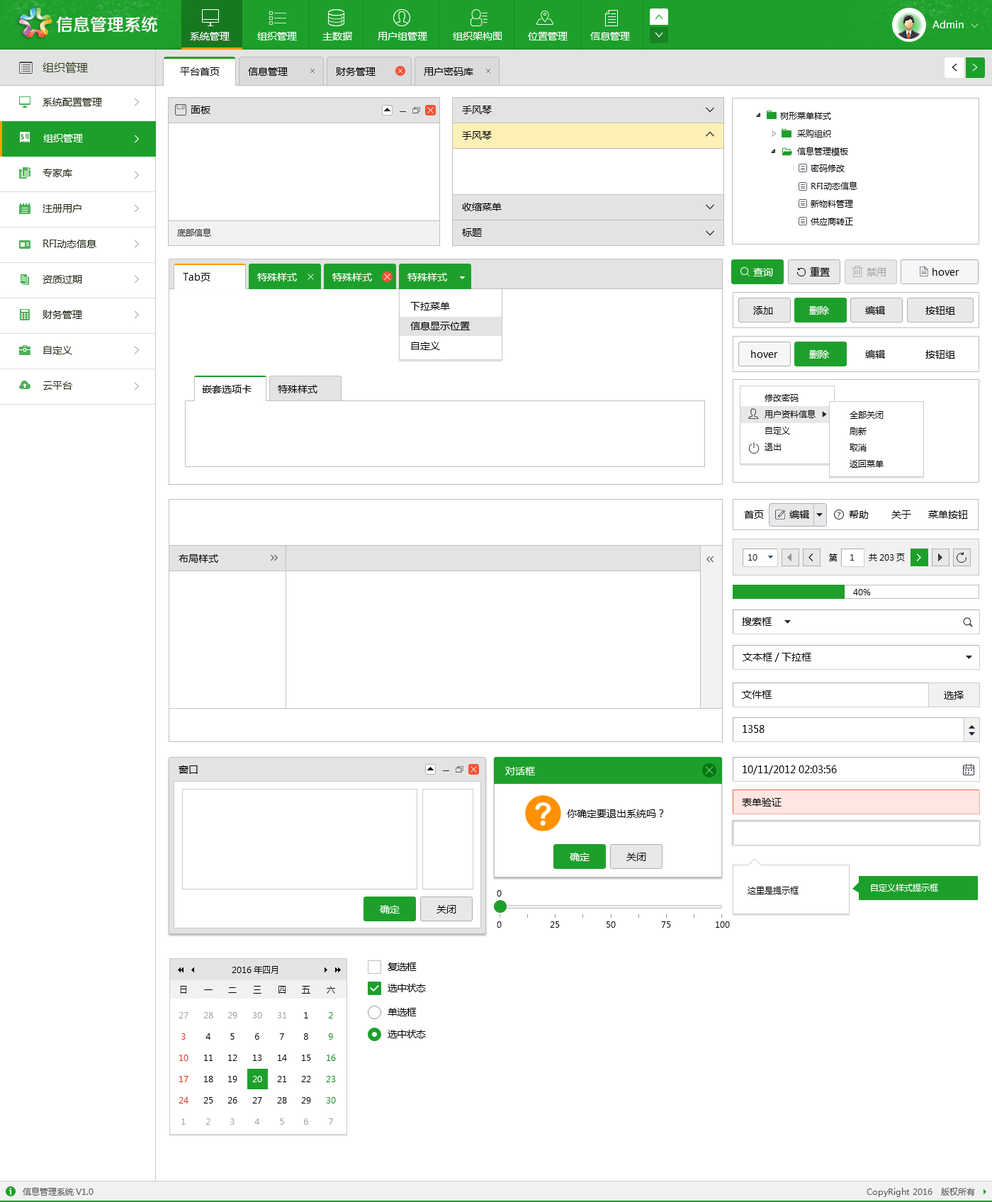
<style>
.page{position:relative;width:992px;height:1202px;background:#ffffff}
.page>*{position:absolute;margin:0}
.t1{font:9.9px "MicrosoftYaHei";color:#000000}
.t2{font:8.5px "MicrosoftYaHei";color:#000000}
.t3{font:8.5px/17.7px "MicrosoftYaHei";color:#000000}
.t4{font:8.5px "MicrosoftYaHei";color:#292929}
.t5{font:9.9px "MicrosoftYaHei";color:#ffffff}
.t6{font:9.9px "MicrosoftYaHei";color:#a3a3a3}
.t7{font:9.9px/19.8px "MicrosoftYaHei";color:#000000}
.t8{font:8.5px/16.3px "MicrosoftYaHei";color:#000000}
.t9{font:8.5px "MicrosoftYaHei";color:#171e24}
.t10{font:8.5px "MicrosoftYaHei";color:#ffffff}
.t11{font:9.9px "MicrosoftYaHei";letter-spacing:-0.05em;color:#000000}
.t12{font:8.5px/21.3px "MicrosoftYaHei";color:#de3618}
.t13{font:8.5px/21.3px "MicrosoftYaHei";color:#a6a6a6}
.t14{font:8.5px/21.3px "MicrosoftYaHei";color:#000000}
.t15{font:8.5px/21.3px "MicrosoftYaHei";color:#ffffff}
.t16{font:8.5px/21.3px "MicrosoftYaHei";color:#198f25}
</style>
<div class="page">
<p class="t1" style="left:191px;top:106px;width:19px;height:8px">面板</p>
<p class="t1" style="left:462px;top:106px;width:30px;height:8px">手风琴</p>
<p class="t2" style="left:780px;top:112px;width:51px;height:8px">树形菜单样式</p>
<p class="t1" style="left:462px;top:131px;width:30px;height:9px">手风琴</p>
<p class="t3" style="left:797px;top:130px;width:51px;height:26px">采购组织<br>信息管理模板</p>
<p class="t3" style="left:811px;top:164px;width:46px;height:61px">密码修改<br>RFI动态信息<br>新物料管理<br>供应商转正</p>
<p class="t1" style="left:462px;top:203px;width:40px;height:8px">收缩菜单</p>
<p class="t4" style="left:177px;top:228px;width:34px;height:9px">底部信息</p>
<p class="t1" style="left:462px;top:228px;width:20px;height:9px">标题</p>
<p class="t5" style="left:753px;top:268px;width:20px;height:8px">查询</p>
<p class="t1" style="left:810px;top:267px;width:20px;height:9px">重置</p>
<p class="t6" style="left:867px;top:268px;width:19px;height:8px">禁用</p>
<p class="t1" style="left:933px;top:268px;width:27px;height:8px">hover</p>
<p class="t1" style="left:183px;top:273px;width:27px;height:8px">Tab页</p>
<p class="t5" style="left:257px;top:273px;width:40px;height:8px">特殊样式</p>
<p class="t5" style="left:332px;top:273px;width:40px;height:8px">特殊样式</p>
<p class="t5" style="left:407px;top:273px;width:40px;height:8px">特殊样式</p>
<p class="t7" style="left:410px;top:302px;width:60px;height:48px">下拉菜单<br>信息显示位置<br>自定义</p>
<p class="t1" style="left:753px;top:306px;width:20px;height:9px">添加</p>
<p class="t5" style="left:809px;top:306px;width:20px;height:9px">删除</p>
<p class="t1" style="left:865px;top:306px;width:20px;height:9px">编辑</p>
<p class="t1" style="left:926px;top:306px;width:29px;height:9px">按钮组</p>
<p class="t1" style="left:751px;top:350px;width:27px;height:8px">hover</p>
<p class="t5" style="left:809px;top:350px;width:20px;height:9px">删除</p>
<p class="t1" style="left:865px;top:350px;width:20px;height:9px">编辑</p>
<p class="t1" style="left:926px;top:350px;width:29px;height:9px">按钮组</p>
<p class="t1" style="left:202px;top:385px;width:50px;height:8px">嵌套选项卡</p>
<p class="t1" style="left:278px;top:385px;width:39px;height:8px">特殊样式</p>
<p class="t8" style="left:765px;top:394px;width:51px;height:57px">修改密码<br>用户资料信息<br>自定义<br>退出</p>
<p class="t8" style="left:850px;top:411px;width:34px;height:57px">全部关闭<br>刷新<br>取消<br>返回菜单</p>
<p class="t1" style="left:744px;top:510px;width:224px;height:9px">首页         编辑              帮助        关于      菜单按钮</p>
<p class="t1" style="left:179px;top:554px;width:39px;height:9px">布局样式</p>
<p class="t9" style="left:748px;top:554px;width:10px;height:7px">10</p>
<p class="t2" style="left:829px;top:553px;width:76px;height:8px">第           共203页</p>
<p class="t9" style="left:850px;top:554px;width:5px;height:7px">1</p>
<p class="t2" style="left:853px;top:589px;width:18px;height:6px">40%</p>
<p class="t1" style="left:742px;top:617px;width:30px;height:9px">搜索框</p>
<p class="t1" style="left:743px;top:653px;width:68px;height:9px">文本框/下拉框</p>
<p class="t1" style="left:742px;top:690px;width:30px;height:9px">文件框</p>
<p class="t1" style="left:944px;top:691px;width:20px;height:8px">选择</p>
<p class="t1" style="left:743px;top:725px;width:22px;height:8px">1358</p>
<p class="t1" style="left:179px;top:765px;width:19px;height:9px">窗口</p>
<p class="t5" style="left:505px;top:767px;width:30px;height:8px">对话框</p>
<p class="t1" style="left:743px;top:765px;width:94px;height:10px">10/11/2012 02:03:56</p>
<p class="t1" style="left:742px;top:798px;width:40px;height:8px">表单验证</p>
<p class="t1" style="left:567px;top:809px;width:97px;height:9px">你确定要退出系统吗？</p>
<p class="t5" style="left:570px;top:853px;width:20px;height:8px">确定</p>
<p class="t1" style="left:626px;top:853px;width:20px;height:8px">关闭</p>
<p class="t2" style="left:497px;top:890px;width:5px;height:6px">0</p>
<p class="t2" style="left:748px;top:887px;width:51px;height:7px">这里是提示框</p>
<p class="t10" style="left:871px;top:884px;width:67px;height:7px">自定义样式提示框</p>
<p class="t5" style="left:380px;top:905px;width:20px;height:8px">确定</p>
<p class="t1" style="left:437px;top:905px;width:19px;height:8px">关闭</p>
<p class="t2" style="left:497px;top:921px;width:5px;height:7px">0</p>
<p class="t2" style="left:550px;top:921px;width:10px;height:7px">25</p>
<p class="t2" style="left:607px;top:921px;width:9px;height:7px">50</p>
<p class="t2" style="left:661px;top:921px;width:10px;height:7px">75</p>
<p class="t2" style="left:716px;top:921px;width:14px;height:7px">100</p>
<p class="t2" style="left:232px;top:966px;width:46px;height:8px">2016年四月</p>
<p class="t11" style="left:388px;top:962px;width:29px;height:9px">复选框</p>
<p class="t2" style="left:180px;top:986px;width:6px;height:8px">日</p>
<p class="t2" style="left:204px;top:989px;width:9px;height:1px">一</p>
<p class="t2" style="left:228px;top:987px;width:9px;height:6px">二</p>
<p class="t2" style="left:253px;top:986px;width:8px;height:8px">三</p>
<p class="t2" style="left:279px;top:986px;width:7px;height:8px">四</p>
<p class="t2" style="left:301px;top:986px;width:9px;height:8px">五</p>
<p class="t2" style="left:327px;top:986px;width:8px;height:8px">六</p>
<p class="t11" style="left:388px;top:984px;width:38px;height:8px">选中状态</p>
<p class="t12" style="left:179px;top:1012px;width:10px;height:113px;text-align:center"><span class="t13">27<br></span>3<br>10<br>17<br>24<br><span class="t13">1</span></p>
<p class="t14" style="left:203px;top:1012px;width:10px;height:113px;text-align:center"><span class="t13">28<br></span>4<br>11<br>18<br>25<br><span class="t13">2</span></p>
<p class="t14" style="left:227px;top:1012px;width:10px;height:113px;text-align:center"><span class="t13">29<br></span>5<br>12<br>19<br>26<br><span class="t13">3</span></p>
<p class="t14" style="left:252px;top:1012px;width:10px;height:113px;text-align:center"><span class="t13">30<br></span>6<br>13<br><span class="t15">20<br></span>27<br><span class="t13">4</span></p>
<p class="t14" style="left:277px;top:1012px;width:10px;height:113px;text-align:center"><span class="t13">31<br></span>7<br>14<br>21<br>28<br><span class="t13">5</span></p>
<p class="t14" style="left:301px;top:1012px;width:10px;height:113px;text-align:center">1<br>8<br>15<br>22<br>29<br><span class="t13">6</span></p>
<p class="t16" style="left:326px;top:1012px;width:10px;height:113px;text-align:center">2<br>9<br>16<br>23<br>30<br><span class="t13">7</span></p>
<p class="t11" style="left:388px;top:1008px;width:29px;height:8px">单选框</p>
<p class="t11" style="left:388px;top:1030px;width:38px;height:8px">选中状态</p>
</div>
